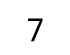
<style>
.page{position:relative;width:70px;height:55px;background:#ffffff}
.page>*{position:absolute;margin:0}
.t1{font:31.8px "DroidSans";color:#000000}
</style>
<div class="page">
<p class="t1" style="left:28px;top:18px;width:15px;height:24px">7</p>
</div>
